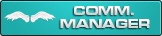
<style>
.page{position:relative;width:162px;height:36px}
.page>*{position:absolute;margin:0}
.t1{font:13px "MicrogrammaDOT-BoldExtended";color:#e9e9e9}
</style>
<div class="page">
<p class="t1" style="left:74px;top:6px;width:60px;height:9px">COMM.</p>
<p class="t1" style="left:60px;top:19px;width:90px;height:9px">MANAGER</p>
</div>
